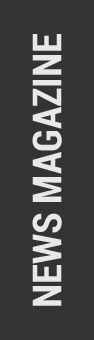
<style>
.page{position:relative;width:94px;height:340px;background:#333333}
.page>*{position:absolute;margin:0}
.t1{font:39.9px "RobotoCondensed-Bold";color:#e8e8e8}
</style>
<div class="page">
<p class="t1" style="left:32px;top:34px;width:30px;height:272px;rotate:-90deg">NEWS MAGAZINE</p>
</div>
